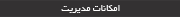
<style>
.page{position:relative;width:180px;height:17px;background:#333132}
.page>*{position:absolute;margin:0}
.t1{font:10px "BYekan";color:#ffffff}
</style>
<div class="page">
<p class="t1" style="left:61px;top:5px;width:59px;height:8px">امکانات مدیریت</p>
</div>
